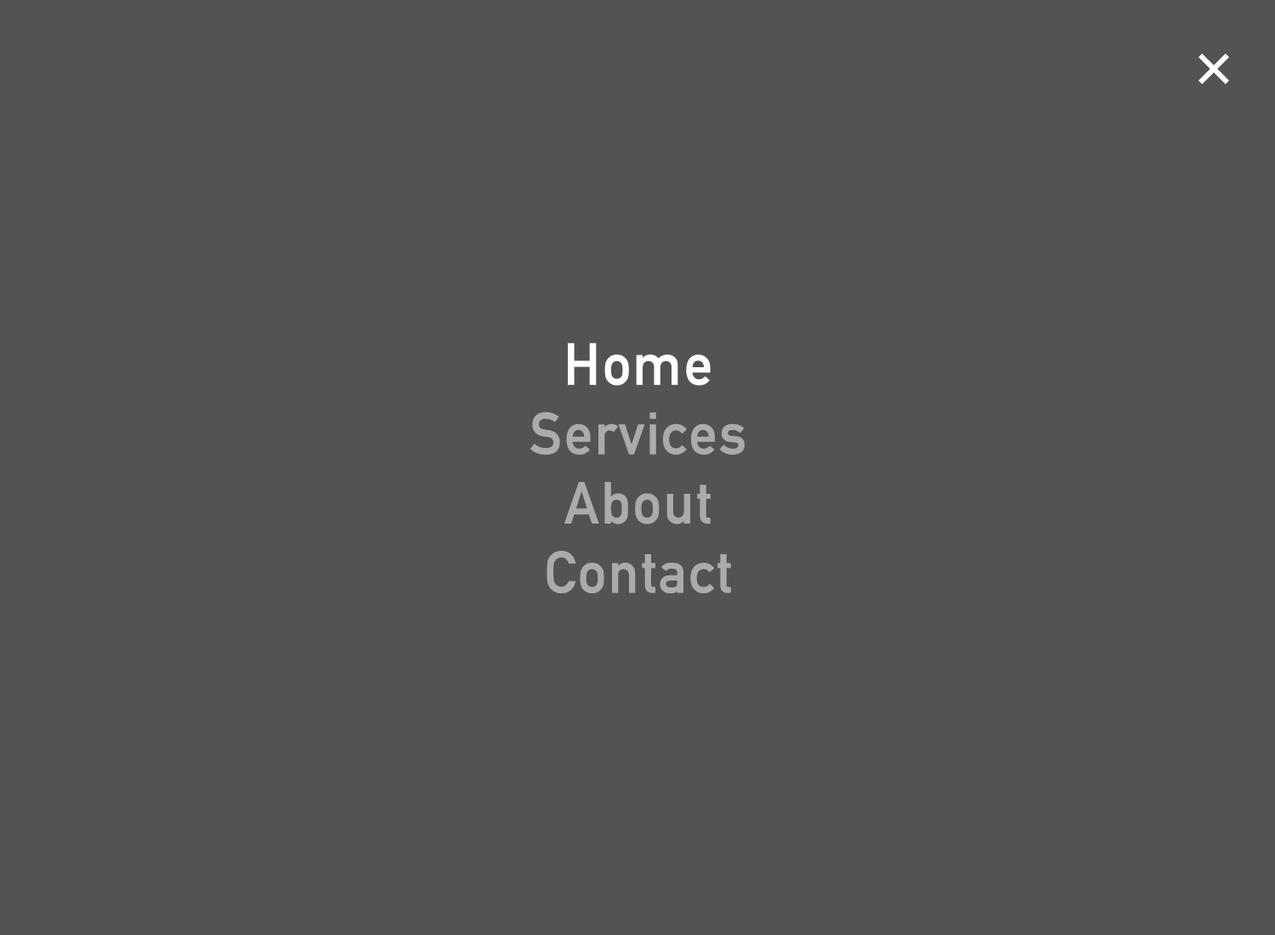
<style>
.page{position:relative;width:1275px;height:935px;background:#535353}
.page>*{position:absolute;margin:0}
.t1{font:57.8px "DINAlternate-Bold";color:#ababab;font-weight:bold}
.t2{font:57.8px "DINAlternate-Bold";color:#ffffff;font-weight:bold}
</style>
<div class="page">
<p class="t1" style="left:530px;top:343px;width:215px;height:250px;text-align:center"><span class="t2">Home<br></span>Services<br>About<br>Contact</p>
</div>
